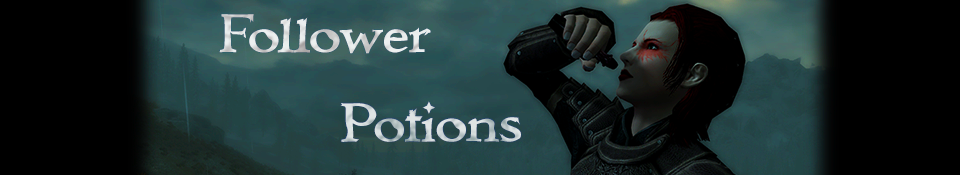
<style>
.page{position:relative;width:960px;height:175px;background:#000000}
.page>*{position:absolute;margin:0}
.t1{font:55.1px "Immortal";color:#e1e3e3}
.t2{font:55.1px "Immortal";color:#cfd6d7}
</style>
<div class="page">
<p class="t1" style="left:219px;top:14px;width:212px;height:40px">Follower</p>
<p class="t1" style="left:219px;top:14px;width:212px;height:40px">Follower</p>
<p class="t2" style="left:340px;top:101px;width:181px;height:41px">Potions</p>
<p class="t2" style="left:340px;top:101px;width:181px;height:41px">Potions</p>
</div>
